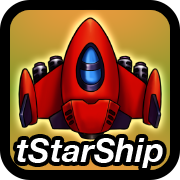
<style>
.page{position:relative;width:180px;height:180px;background:#000000}
.page>*{position:absolute;margin:0}
.t1{font:33px "HelveticaNeue-BoldItalic";color:#ffffff}
</style>
<div class="page">
<p class="t1" style="left:16px;top:138px;width:147px;height:30px">tStarShip</p>
</div>
